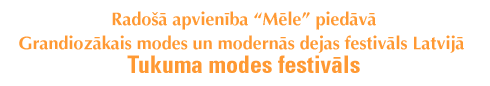
<style>
.page{position:relative;width:490px;height:86px;background:#ffffff}
.page>*{position:absolute;margin:0}
.t1{font:18px/24px "RimOptima-Bold";color:#ff9933}
.t2{font:24px/24px "RimUniversConden-Bold";color:#ff9933}
</style>
<div class="page">
<p class="t1" style="left:19px;top:11px;width:445px;height:62px;text-align:center">Radoðâ apvienîba “Mçle” piedâvâ<br>Grandiozâkais modes un modernâs dejas festivâls Latvijâā <br><span class="t2">Tukuma modes festivâls</span></p>
</div>
